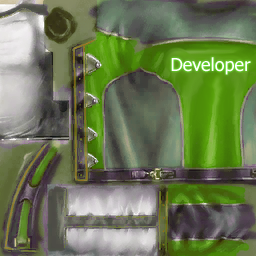
<style>
.page{position:relative;width:256px;height:256px}
.page>*{position:absolute;margin:0}
.t1{font:18px "Tahoma";color:#ffffff}
</style>
<div class="page">
<p class="t1" style="left:171px;top:57px;width:80px;height:18px">Developer</p>
</div>
